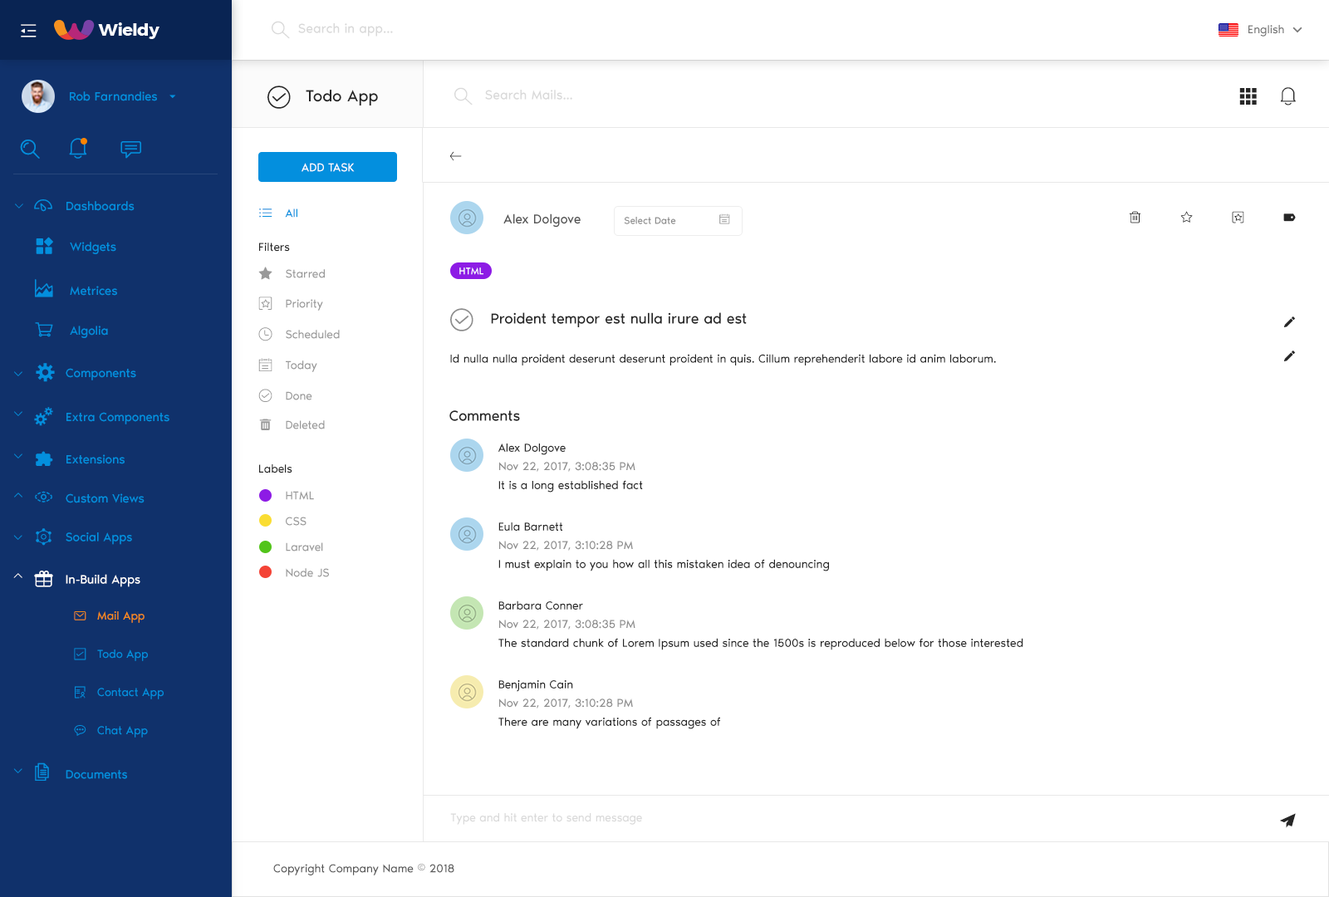
<style>
.page{position:relative;width:1329px;height:897px;background:#ffffff}
.page>*{position:absolute;margin:0}
.t1{font:13.3px "NoirPro-Regular";color:#d9d9d9}
.t2{font:11.6px "NoirPro-Regular";color:#757575}
.t3{font:23.3px "gaxonant";color:#262626}
.t4{font:16.6px "NoirPro-Regular";color:#262626}
.t5{font:18.3px "gaxonant";color:#262626}
.t6{font:12.5px "NoirPro-Regular";color:#038fde}
.t7{font:11.6px "gaxonant"}
.t8{font:11.6px "NoirPro-Regular";color:#ffffff;text-transform:uppercase}
.t9{font:10px "gaxonant"}
.t10{font:18.3px "gaxonant";color:#038fde}
.t11{font:13.3px "gaxonant";color:#038fde}
.t12{font:11.6px "NoirPro-Regular";color:#038fde}
.t13{font:13.3px "NoirPro-Regular";color:#535353}
.t14{font:10px "NoirPro-Regular";color:#8c8c8c}
.t15{font:11.6px "NoirPro-Regular";color:#262626}
.t16{font:11.6px "NoirPro-Regular";color:#999999}
.t17{font:10px "NoirPro-Regular";color:#ffffff}
.t18{font:23.3px "gaxonant";color:#8c8c8c}
.t19{font:15px "NoirPro-Regular";color:#262626}
.t20{font:11.6px "gaxonant";color:#262626}
.t21{font:13.3px "gaxonant";color:#999999}
.t22{font:9.7px "gaxonant";color:#038fde}
.t23{font:11.6px "NoirPro-Regular";color:#8c8c8c}
.t24{font:10px "gaxonant";color:#038fde}
.t25{font:12.4px "NoirPro-Regular";color:#038fde}
.t26{font:10px "gaxonant";color:#ffffff}
.t27{font:12.4px "NoirPro-Regular";color:#ffffff}
.t28{font:11.8px "gaxonant";color:#fa8c16}
.t29{font:11.8px "NoirPro-Regular";color:#fa8c16}
.t30{font:11.8px "NoirPro-Regular";color:#038fde}
.t31{font:11.8px "gaxonant";color:#038fde}
.t32{font:18.2px "gaxonant";color:#038fde}
.t33{font:11.6px "NoirPro-Regular";color:#d9d9d9}
.t34{font:11.6px "NoirPro-Regular";color:#595959}
</style>
<div class="page">
<p class="t1" style="left:298px;top:23px;width:95px;height:14px">Search in app...</p>
<p class="t2" style="left:1249px;top:25px;width:35px;height:12px">English</p>
<p class="t3" style="left:267px;top:86px;width:24px;height:23px">Y</p>
<p class="t4" style="left:306px;top:90px;width:72px;height:15px">Todo App</p>
<p class="t1" style="left:485px;top:90px;width:87px;height:10px">Search Mails...</p>
<p class="t5" style="left:1239px;top:88px;width:18px;height:17px">k</p>
<p class="t6" style="left:70px;top:91px;width:87px;height:10px">Rob Farnandies</p>
<p class="t7" style="left:449px;top:151px;width:13px;height:10px">o</p>
<p class="t8" style="left:302px;top:163px;width:53px;height:9px">Add Task</p>
<p class="t9" style="left:15px;top:204px;width:8px;height:5px">2</p>
<p class="t10" style="left:34px;top:199px;width:18px;height:13px">-</p>
<p class="t6" style="left:66px;top:201px;width:69px;height:10px">Dashboards</p>
<p class="t11" style="left:259px;top:209px;width:13px;height:9px">h</p>
<p class="t12" style="left:285px;top:209px;width:12px;height:9px">All</p>
<p class="t13" style="left:503px;top:213px;width:78px;height:15px">Alex Dolgove</p>
<p class="t14" style="left:624px;top:217px;width:52px;height:7px">Select Date</p>
<p class="t9" style="left:719px;top:213px;width:11px;height:11px">E</p>
<p class="t6" style="left:70px;top:242px;width:46px;height:12px">Widgets</p>
<p class="t15" style="left:259px;top:243px;width:31px;height:9px">Filters</p>
<p class="t16" style="left:286px;top:269px;width:39px;height:9px">Starred</p>
<p class="t17" style="left:459px;top:267px;width:24px;height:8px">HTML</p>
<p class="t10" style="left:35px;top:279px;width:18px;height:18px">m</p>
<p class="t6" style="left:70px;top:286px;width:47px;height:10px">Metrices</p>
<p class="t16" style="left:286px;top:299px;width:37px;height:12px">Priority</p>
<p class="t18" style="left:450px;top:308px;width:23px;height:23px">Y</p>
<p class="t19" style="left:491px;top:312px;width:256px;height:15px">Proident tempor est nulla irure ad est</p>
<p class="t20" style="left:1284px;top:316px;width:12px;height:11px">_</p>
<p class="t6" style="left:70px;top:326px;width:38px;height:12px">Algolia</p>
<p class="t16" style="left:286px;top:330px;width:54px;height:9px">Scheduled</p>
<p class="t15" style="left:450px;top:354px;width:546px;height:12px">Id nulla nulla proident deserunt deserunt proident in quis. Cillum reprehenderit labore id anim laborum.</p>
<p class="t20" style="left:1284px;top:351px;width:12px;height:10px">_</p>
<p class="t10" style="left:36px;top:363px;width:19px;height:19px">%</p>
<p class="t21" style="left:258px;top:358px;width:14px;height:13px">E</p>
<p class="t16" style="left:286px;top:361px;width:31px;height:11px">Today</p>
<p class="t22" style="left:14px;top:371px;width:8px;height:5px">2</p>
<p class="t6" style="left:66px;top:368px;width:70px;height:12px">Components</p>
<p class="t21" style="left:258px;top:389px;width:14px;height:13px">Y</p>
<p class="t16" style="left:286px;top:391px;width:26px;height:9px">Done</p>
<p class="t22" style="left:14px;top:411px;width:8px;height:5px">2</p>
<p class="t6" style="left:66px;top:412px;width:103px;height:12px">Extra Components</p>
<p class="t19" style="left:449px;top:410px;width:71px;height:11px">Comments</p>
<p class="t16" style="left:286px;top:420px;width:39px;height:9px">Deleted</p>
<p class="t15" style="left:498px;top:444px;width:68px;height:11px">Alex Dolgove</p>
<p class="t22" style="left:14px;top:454px;width:8px;height:5px">2</p>
<p class="t6" style="left:66px;top:454px;width:59px;height:10px">Extensions</p>
<p class="t23" style="left:499px;top:462px;width:136px;height:10px">Nov 22, 2017, 3:08:35 PM</p>
<p class="t15" style="left:259px;top:464px;width:33px;height:9px">Labels</p>
<p class="t15" style="left:498px;top:480px;width:145px;height:13px">It is a long established fact</p>
<p class="t24" style="left:14px;top:493px;width:8px;height:5px">5</p>
<p class="t10" style="left:35px;top:491px;width:17px;height:12px">,</p>
<p class="t6" style="left:66px;top:493px;width:79px;height:10px">Custom Views</p>
<p class="t16" style="left:286px;top:491px;width:28px;height:9px">HTML</p>
<p class="t16" style="left:286px;top:517px;width:21px;height:9px">CSS</p>
<p class="t25" style="left:66px;top:532px;width:66px;height:13px">Social Apps</p>
<p class="t15" style="left:498px;top:523px;width:64px;height:8px">Eula Barnett</p>
<p class="t22" style="left:13px;top:535px;width:9px;height:5px">2</p>
<p class="t16" style="left:286px;top:542px;width:37px;height:10px">Laravel</p>
<p class="t23" style="left:499px;top:541px;width:134px;height:10px">Nov 22, 2017, 3:10:28 PM</p>
<p class="t16" style="left:286px;top:568px;width:43px;height:9px">Node JS</p>
<p class="t15" style="left:498px;top:559px;width:331px;height:13px">I must explain to you how all this mistaken idea of denouncing</p>
<p class="t26" style="left:13px;top:573px;width:9px;height:5px">5</p>
<p class="t27" style="left:66px;top:574px;width:74px;height:13px">In-Build Apps</p>
<p class="t15" style="left:498px;top:601px;width:85px;height:9px">Barbara Conner</p>
<p class="t28" style="left:74px;top:611px;width:12px;height:10px">}</p>
<p class="t29" style="left:97px;top:611px;width:48px;height:12px">Mail App</p>
<p class="t23" style="left:499px;top:620px;width:136px;height:10px">Nov 22, 2017, 3:08:35 PM</p>
<p class="t15" style="left:498px;top:638px;width:525px;height:12px">The standard chunk of Lorem Ipsum used since the 1500s is reproduced below for those interested</p>
<p class="t30" style="left:97px;top:650px;width:51px;height:11px">Todo App</p>
<p class="t31" style="left:75px;top:686px;width:11px;height:13px">r</p>
<p class="t30" style="left:97px;top:688px;width:67px;height:11px">Contact App</p>
<p class="t15" style="left:498px;top:680px;width:75px;height:12px">Benjamin Cain</p>
<p class="t23" style="left:499px;top:699px;width:134px;height:10px">Nov 22, 2017, 3:10:28 PM</p>
<p class="t31" style="left:74px;top:725px;width:12px;height:11px">V</p>
<p class="t15" style="left:498px;top:717px;width:222px;height:12px">There are many variations of passages of</p>
<p class="t30" style="left:97px;top:726px;width:51px;height:12px">Chat App</p>
<p class="t22" style="left:13px;top:768px;width:9px;height:5px">2</p>
<p class="t32" style="left:35px;top:763px;width:14px;height:18px">)</p>
<p class="t25" style="left:66px;top:770px;width:61px;height:9px">Documents</p>
<p class="t33" style="left:450px;top:813px;width:192px;height:12px">Type and hit enter to send message</p>
<p class="t34" style="left:273px;top:864px;width:181px;height:12px">Copyright Company Name © 2018</p>
</div>
